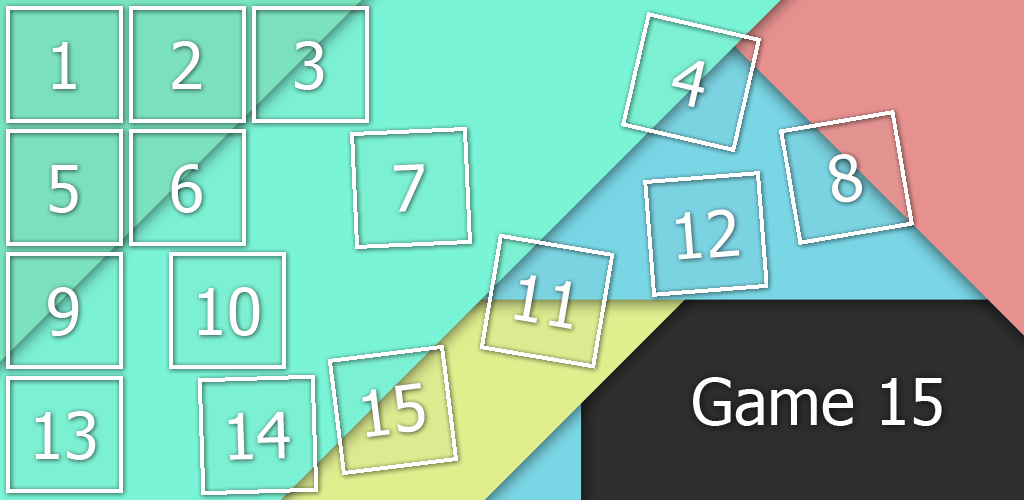
<style>
.page{position:relative;width:1024px;height:500px}
.page>*{position:absolute;margin:0}
.t1{font:64px "Tahoma";color:#ffffff}
</style>
<div class="page">
<p class="t1" style="left:172px;top:41px;width:30px;height:48px">2</p>
<p class="t1" style="left:295px;top:41px;width:29px;height:49px">3</p>
<p class="t1" style="left:53px;top:42px;width:23px;height:47px">1</p>
<p class="t1" style="left:671px;top:60px;width:34px;height:48px;rotate:13deg">4</p>
<p class="t1" style="left:829px;top:154px;width:33px;height:49px;rotate:-10deg">8</p>
<p class="t1" style="left:49px;top:165px;width:29px;height:48px">5</p>
<p class="t1" style="left:171px;top:164px;width:31px;height:49px">6</p>
<p class="t1" style="left:394px;top:164px;width:30px;height:48px;rotate:-3deg">7</p>
<p class="t1" style="left:676px;top:209px;width:64px;height:51px;rotate:-4deg">12</p>
<p class="t1" style="left:514px;top:275px;width:58px;height:54px;rotate:10deg">11</p>
<p class="t1" style="left:48px;top:287px;width:31px;height:49px">9</p>
<p class="t1" style="left:199px;top:287px;width:61px;height:49px">10</p>
<p class="t1" style="left:693px;top:377px;width:249px;height:49px">Game 15</p>
<p class="t1" style="left:362px;top:383px;width:63px;height:54px;rotate:-7deg">15</p>
<p class="t1" style="left:36px;top:411px;width:60px;height:49px">13</p>
<p class="t1" style="left:228px;top:411px;width:62px;height:49px;rotate:-2deg">14</p>
</div>
